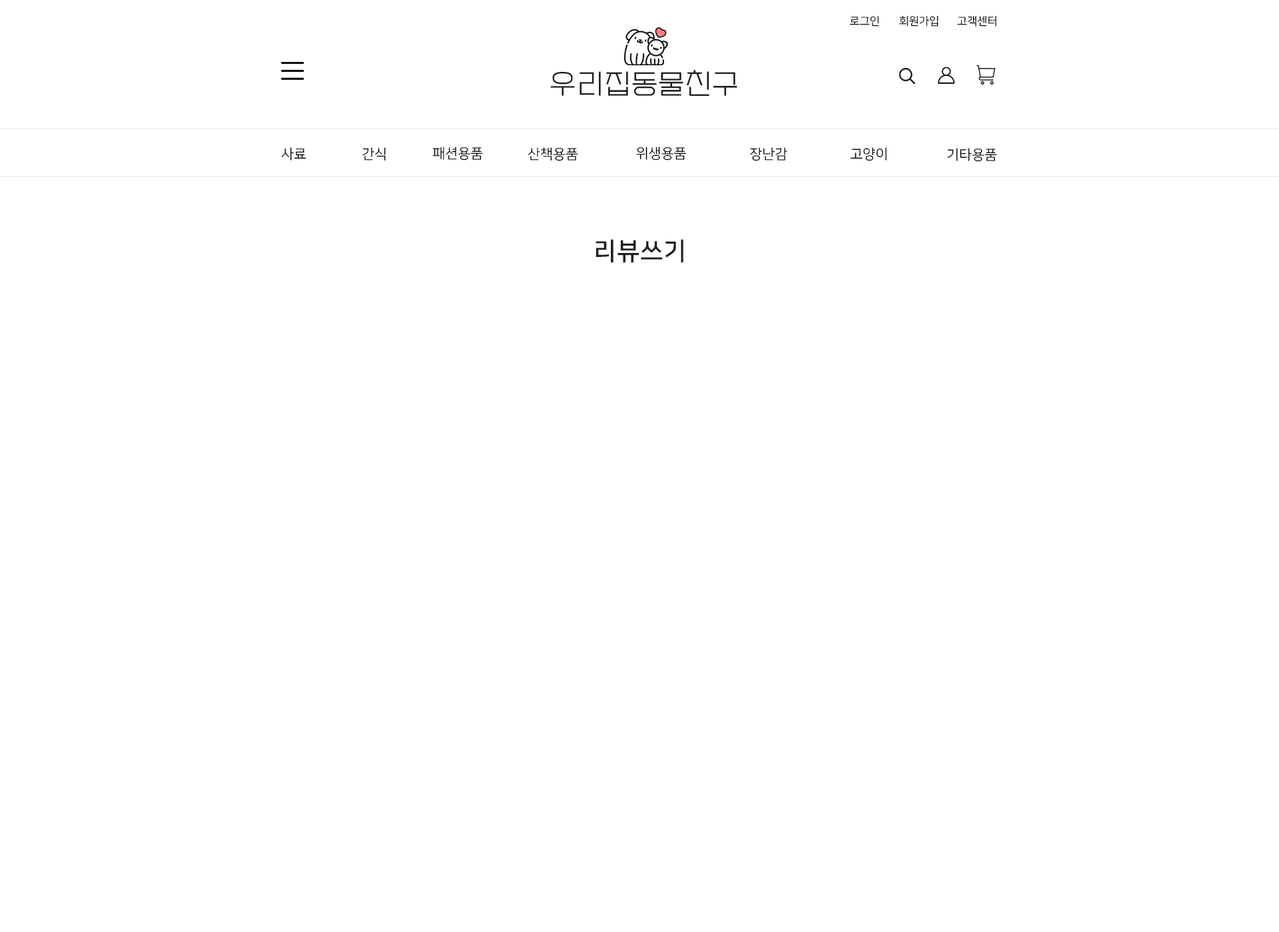
<style>
.page{position:relative;width:1279px;height:932px;background:#ffffff}
.page>*{position:absolute;margin:0}
.t1{font:11.1px "NanumSquareR";color:#000000}
.t2{font:27.8px "EF_watermelonSalad";letter-spacing:0.025em;color:#202020}
.t3{font:13.9px "NanumSquareR";color:#000000}
.t4{font:25px "NanumSquareB";letter-spacing:0.025em;color:#202020}
</style>
<div class="page">
<p class="t1" style="left:849px;top:15px;width:30px;height:12px">로그인</p>
<p class="t1" style="left:899px;top:15px;width:39px;height:12px">회원가입</p>
<p class="t1" style="left:957px;top:15px;width:39px;height:12px">고객센터</p>
<p class="t2" style="left:550px;top:70px;width:187px;height:26px">우리집동물친구</p>
<p class="t3" style="left:281px;top:147px;width:25px;height:14px">사료</p>
<p class="t3" style="left:362px;top:147px;width:24px;height:14px">간식</p>
<p class="t3" style="left:432px;top:147px;width:51px;height:14px">패션용품</p>
<p class="t3" style="left:528px;top:147px;width:50px;height:14px">산책용품</p>
<p class="t3" style="left:636px;top:147px;width:50px;height:14px">위생용품</p>
<p class="t3" style="left:750px;top:147px;width:37px;height:14px">장난감</p>
<p class="t3" style="left:850px;top:147px;width:37px;height:14px">고양이</p>
<p class="t3" style="left:947px;top:148px;width:50px;height:14px">기타용품</p>
<p class="t4" style="left:595px;top:239px;width:88px;height:24px">리뷰쓰기</p>
</div>
